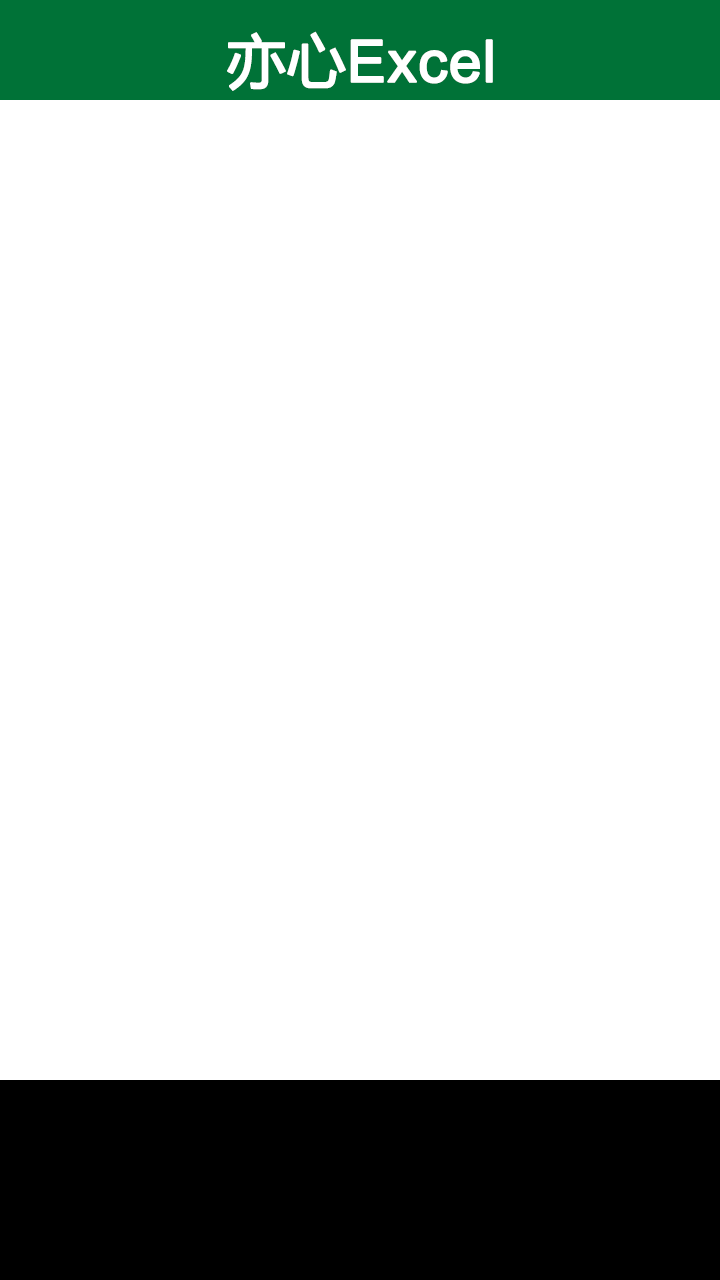
<style>
.page{position:relative;width:720px;height:1280px;background:#ffffff}
.page>*{position:absolute;margin:0}
.t1{font:58.3px "ArialMT";color:#ffffff;font-weight:bold}
.t2{font:58.3px "MicrosoftYaHei";color:#ffffff;font-weight:bold}
</style>
<div class="page">
<p class="t1" style="left:227px;top:31px;width:266px;height:60px"><span class="t2">亦心</span>Excel</p>
</div>
